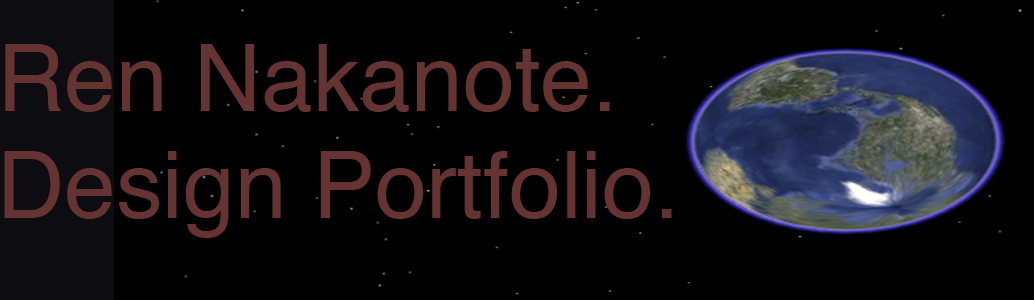
<style>
.page{position:relative;width:1034px;height:300px;background:#000000}
.page>*{position:absolute;margin:0}
.t1{font:93.1px "Helvetica";color:#663333}
</style>
<div class="page">
<p class="t1" style="left:5px;top:44px;width:605px;height:68px">Ren Nakanote.</p>
<p class="t1" style="left:4px;top:151px;width:668px;height:87px">Design Portfolio.</p>
</div>
